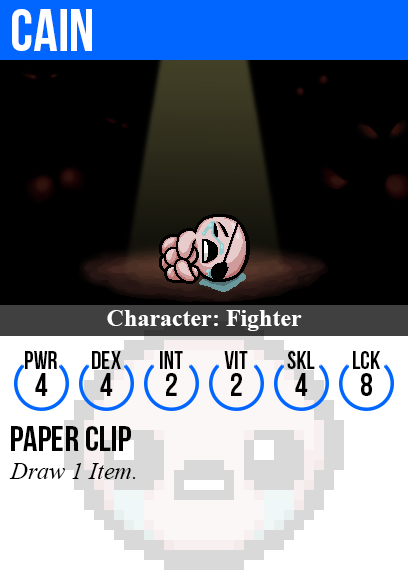
<style>
.page{position:relative;width:408px;height:585px;background:#000000}
.page>*{position:absolute;margin:0}
.t1{font:60px "BebasNeue";color:#ffffff}
.t2{font:24px "TimesNewRomanPS-BoldMT";color:#ffffff}
.t3{font:25px "BebasNeue";color:#000000}
.t4{font:32px "BebasNeue";color:#000000}
.t5{font:36px "BebasNeue";color:#000000}
.t6{font:24px "TimesNewRomanPS-ItalicMT";color:#000000}
</style>
<div class="page">
<p class="t1" style="left:12px;top:9px;width:80px;height:42px">cain</p>
<p class="t2" style="left:107px;top:310px;width:195px;height:21px">Character: Fighter</p>
<p class="t3" style="left:25px;top:351px;width:32px;height:18px">PWR</p>
<p class="t3" style="left:92px;top:351px;width:29px;height:18px">dex</p>
<p class="t3" style="left:160px;top:351px;width:23px;height:18px">int</p>
<p class="t3" style="left:224px;top:351px;width:24px;height:18px">vit</p>
<p class="t3" style="left:287px;top:351px;width:28px;height:18px">skl</p>
<p class="t3" style="left:353px;top:351px;width:27px;height:18px">lck</p>
<p class="t4" style="left:35px;top:373px;width:13px;height:23px">4</p>
<p class="t4" style="left:100px;top:373px;width:13px;height:23px">4</p>
<p class="t4" style="left:166px;top:373px;width:11px;height:23px">2</p>
<p class="t4" style="left:231px;top:373px;width:11px;height:23px">2</p>
<p class="t4" style="left:295px;top:373px;width:13px;height:23px">4</p>
<p class="t4" style="left:361px;top:373px;width:11px;height:23px">8</p>
<p class="t5" style="left:11px;top:426px;width:120px;height:25px">paper clip</p>
<p class="t6" style="left:9px;top:463px;width:127px;height:16px">Draw 1 Item.</p>
</div>
